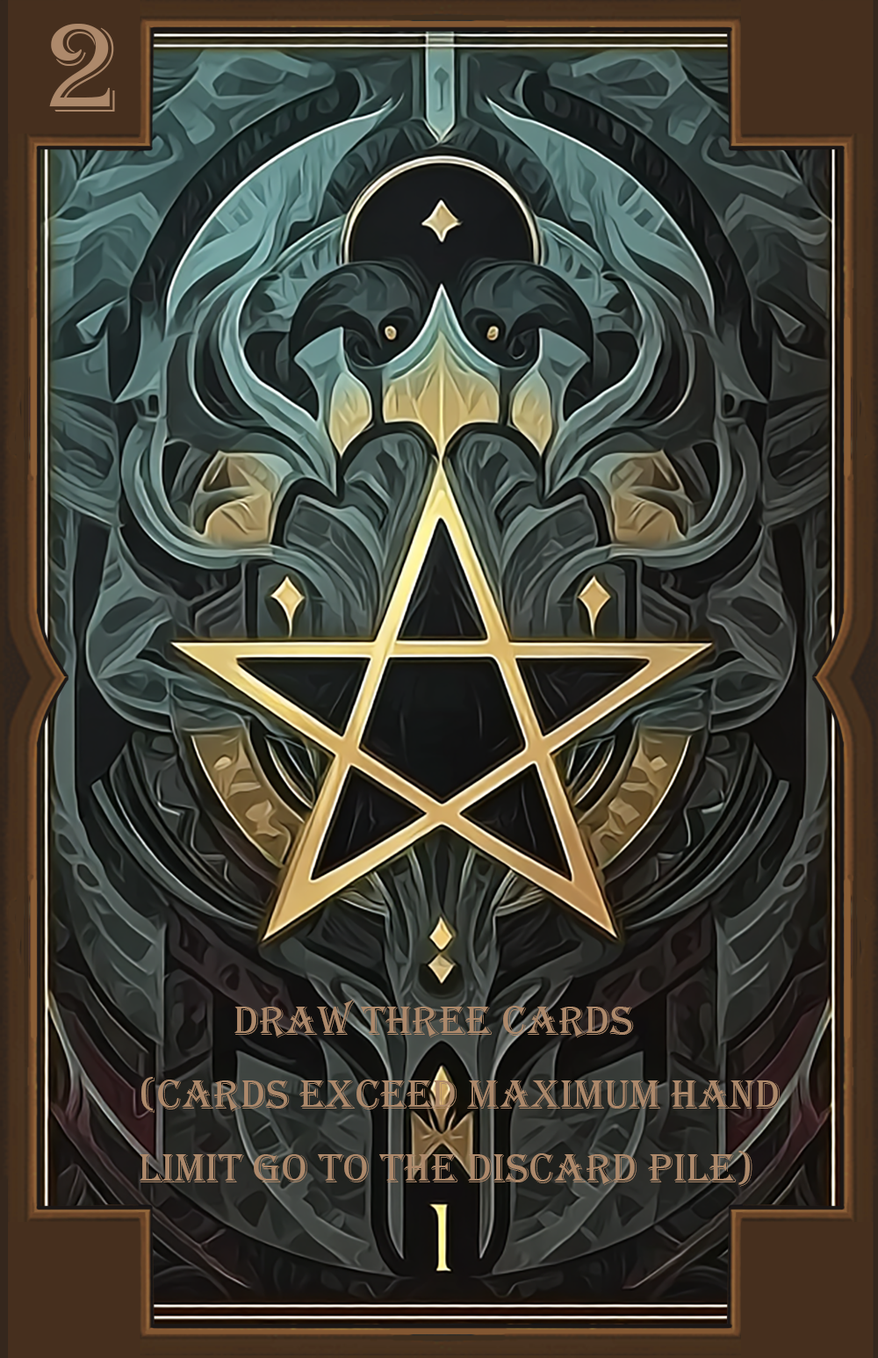
<style>
.page{position:relative;width:878px;height:1358px}
.page>*{position:absolute;margin:0}
.t1{font:131.7px "Algerian";color:#ad896b}
.t2{font:42.2px "Algerian";color:#ad896b}
</style>
<div class="page">
<p class="t1" style="left:49px;top:24px;width:66px;height:88px">2</p>
<p class="t2" style="left:140px;top:999px;width:640px;height:187px">Draw three cards<br>(CARDS exceed maximum hand <br>limit GO to the discard pile)</p>
</div>
